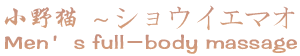
<style>
.page{position:relative;width:300px;height:56px;background:#ffffff}
.page>*{position:absolute;margin:0}
.t1{font:26.1px "FZXKJW--GB1-0";color:#cd967c}
.t2{font:25px "FZXIANGLJW--GB1-0";color:#cd967c}
</style>
<div class="page">
<p class="t1" style="left:4px;top:5px;width:291px;height:26px">小野猫 ～ショウイエマオ</p>
<p class="t2" style="left:4px;top:34px;width:293px;height:20px">Men’s full-body massage</p>
</div>
